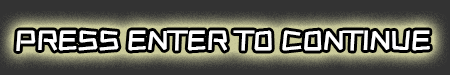
<style>
.page{position:relative;width:450px;height:75px;background:#333333}
.page>*{position:absolute;margin:0}
.t1{font:27px "ZCOOLKuaiLe-Regular";color:#ffffff;font-weight:bold}
</style>
<div class="page">
<p class="t1" style="left:16px;top:30px;width:414px;height:21px">PRESS ENTER TO CONTINUE</p>
</div>
